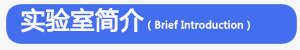
<style>
.page{position:relative;width:300px;height:50px;background:#436eee}
.page>*{position:absolute;margin:0}
.t1{font:10px "MicrosoftYaHei";color:#f7f7f7;font-weight:bold}
.t2{font:24px "MicrosoftYaHei";color:#f7f7f7;font-weight:bold}
</style>
<div class="page">
<p class="t1" style="left:21px;top:7px;width:229px;height:26px"><span class="t2">实验室简介</span>（Brief Introduction）</p>
</div>
